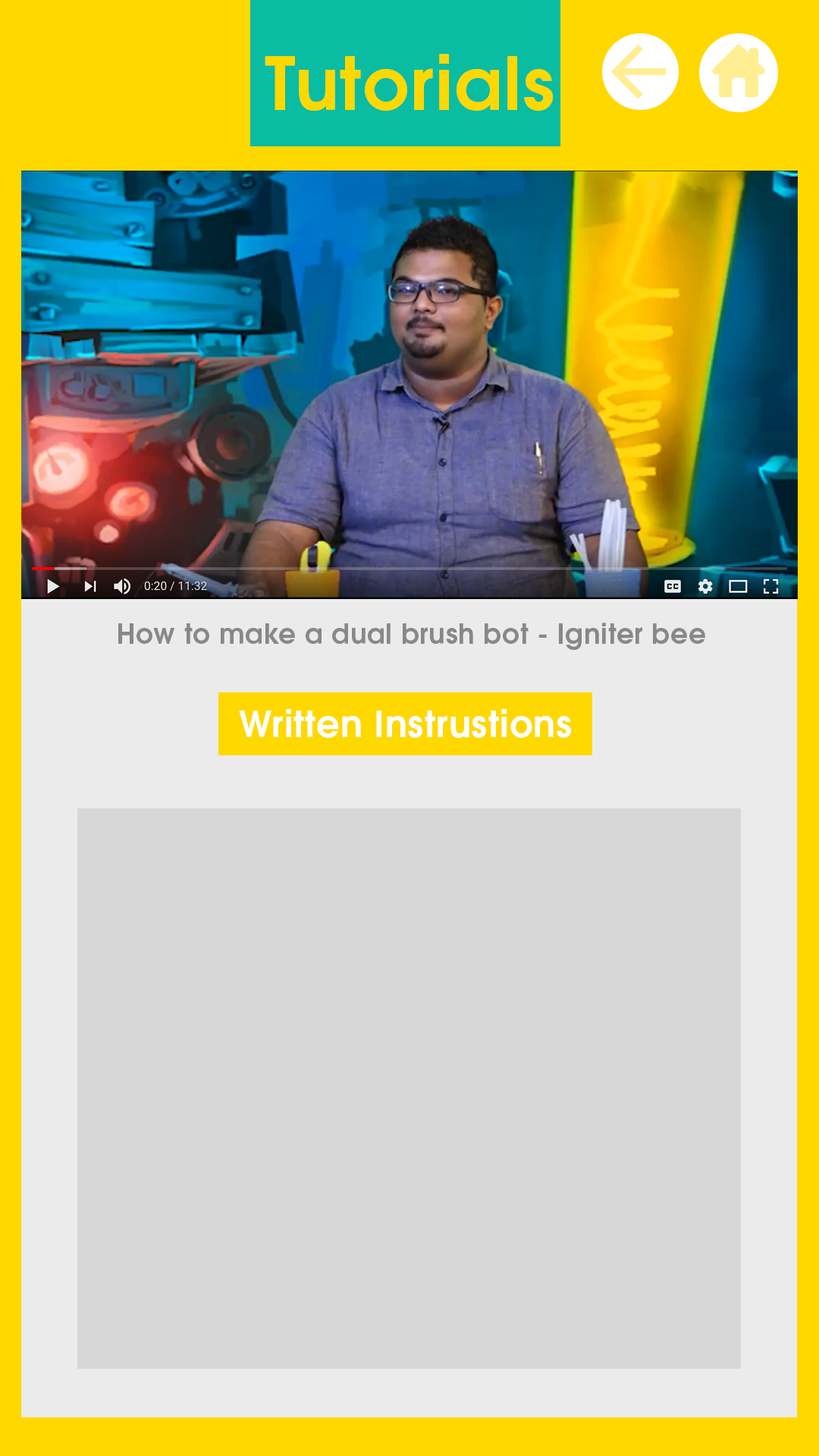
<style>
.page{position:relative;width:819px;height:1456px;background:#d7d7d7}
.page>*{position:absolute;margin:0}
.t1{font:72.8px "TeXGyreAdventor-Bold";letter-spacing:0.02em;color:#ffd800}
.t2{font:27.3px "TeXGyreAdventor-Bold";letter-spacing:0.02em;color:#888888}
.t3{font:36.4px "TeXGyreAdventor-Bold";letter-spacing:0.02em;color:#ffffff}
</style>
<div class="page">
<p class="t1" style="left:265px;top:54px;width:288px;height:57px">Tutorials</p>
<p class="t2" style="left:118px;top:623px;width:587px;height:27px">How to make a dual brush bot - Igniter bee</p>
<p class="t3" style="left:239px;top:709px;width:332px;height:29px">Written Instrustions</p>
</div>
